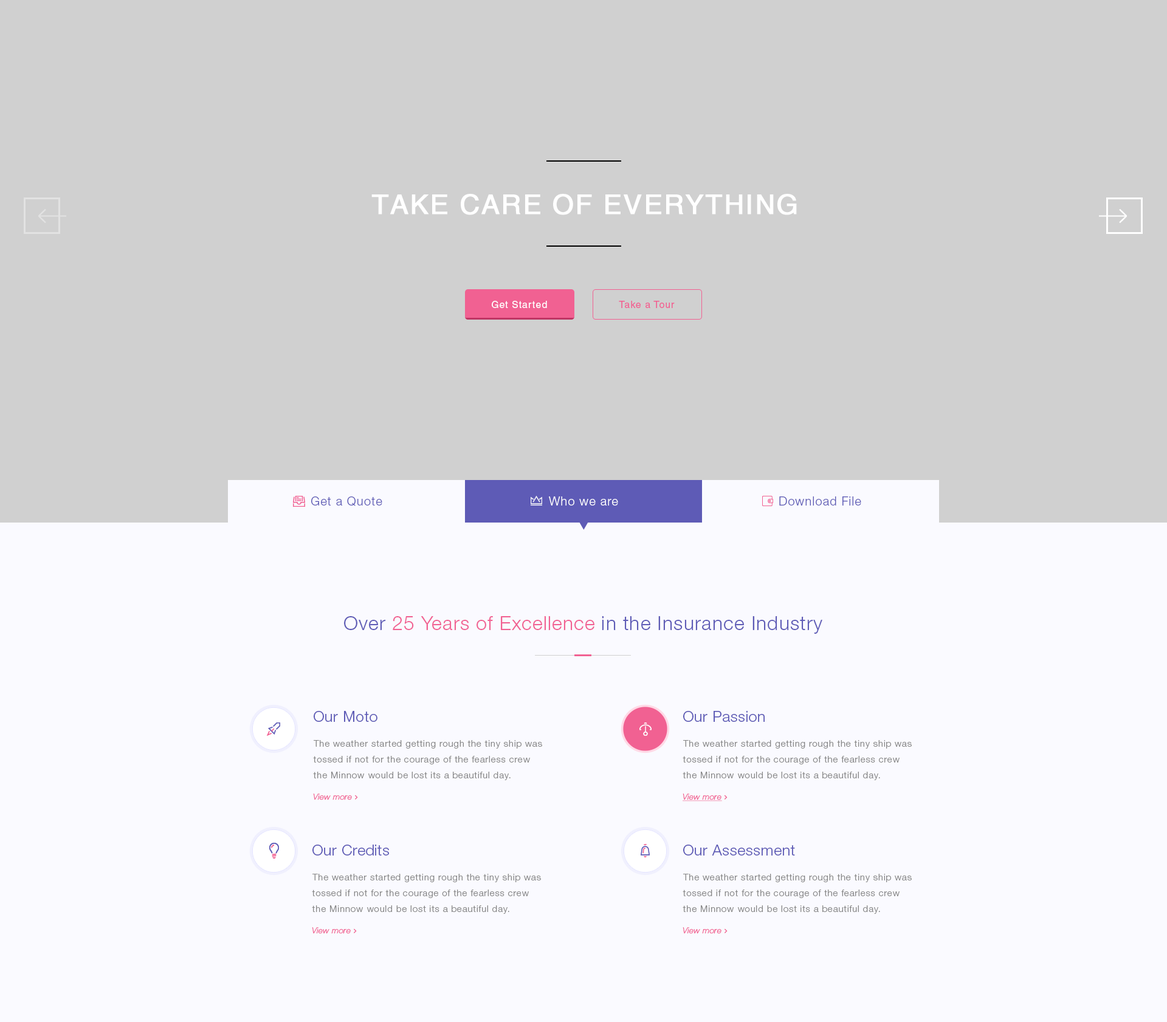
<style>
.page{position:relative;width:1167px;height:1022px;background:#d0d0d0}
.page>*{position:absolute;margin:0}
.t1{font:27.3px "Helvetica";letter-spacing:0.04em;color:#ffffff;text-transform:uppercase;font-weight:bold}
.t2{font:9.7px "Helvetica";letter-spacing:0.06em;color:#ffffff}
.t3{font:9.7px "Helvetica";letter-spacing:0.06em;color:#f16192}
.t4{font:12.2px "HelveticaNeueLTStd-Lt";letter-spacing:0.06em;color:#5e5bb6}
.t5{font:12.2px "HelveticaNeueLTStd-Lt";letter-spacing:0.06em;color:#ffffff}
.t6{font:19.4px "HelveticaNeueLTStd-Lt";letter-spacing:0.035em;color:#5e5bb6}
.t7{font:19.4px "HelveticaNeueLTStd-Lt";letter-spacing:0.035em;color:#f16192}
.t8{font:15.2px "HelveticaNeueLTStd-Lt";letter-spacing:0.02em;color:#5e5bb6}
.t9{font:9.1px/15.8px "HelveticaNeueLTStd-Lt";letter-spacing:0.06em;color:#888888}
</style>
<div class="page">
<p class="t1" style="left:371px;top:194px;width:426px;height:21px">take care of Everything</p>
<p class="t2" style="left:492px;top:301px;width:55px;height:7px">Get Started</p>
<p class="t2" style="left:492px;top:301px;width:55px;height:7px">Get Started</p>
<p class="t2" style="left:492px;top:301px;width:55px;height:7px">Get Started</p>
<p class="t3" style="left:619px;top:301px;width:55px;height:7px">Take a Tour</p>
<p class="t3" style="left:619px;top:301px;width:55px;height:7px">Take a Tour</p>
<p class="t3" style="left:619px;top:301px;width:55px;height:7px">Take a Tour</p>
<p class="t4" style="left:311px;top:496px;width:71px;height:10px">Get a Quote</p>
<p class="t5" style="left:549px;top:496px;width:69px;height:10px">Who we are</p>
<p class="t4" style="left:779px;top:496px;width:82px;height:10px">Download File</p>
<p class="t6" style="left:344px;top:616px;width:478px;height:18px">Over <span class="t7">25 Years of Excellence</span> in the Insurance Industry</p>
<p class="t8" style="left:314px;top:711px;width:63px;height:11px">Our Moto</p>
<p class="t8" style="left:683px;top:711px;width:81px;height:11px">Our Passion</p>
<p class="t9" style="left:313px;top:740px;width:229px;height:40px">The weather started getting rough the tiny ship was tossed if not for the courage of the fearless crew the Minnow would be lost its a beautiful day.</p>
<p class="t9" style="left:682px;top:740px;width:229px;height:40px">The weather started getting rough the tiny ship was tossed if not for the courage of the fearless crew the Minnow would be lost its a beautiful day.</p>
<p class="t8" style="left:312px;top:845px;width:77px;height:11px">Our Credits</p>
<p class="t8" style="left:683px;top:845px;width:112px;height:11px">Our Assessment</p>
<p class="t9" style="left:312px;top:874px;width:229px;height:40px">The weather started getting rough the tiny ship was tossed if not for the courage of the fearless crew the Minnow would be lost its a beautiful day.</p>
<p class="t9" style="left:682px;top:874px;width:229px;height:40px">The weather started getting rough the tiny ship was tossed if not for the courage of the fearless crew the Minnow would be lost its a beautiful day.</p>
</div>
